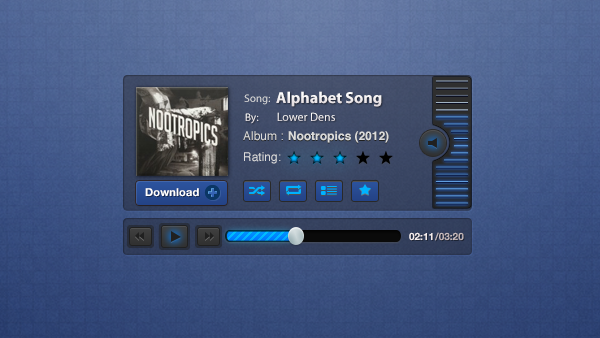
<style>
.page{position:relative;width:600px;height:338px}
.page>*{position:absolute;margin:0}
.t1{font:11px "MyriadPro-Regular";color:#dbdbdb}
.t2{font:16px "MyriadPro-Bold";color:#ffffff}
.t3{font:12px "MyriadPro-Regular";color:#ffffff}
.t4{font:11px "MyriadPro-Regular";color:#ccc0c2}
.t5{font:12px "Helvetica-Bold";color:#dbdbdb}
.t6{font:12px "Helvetica";color:#dbdbdb}
.t7{font:11px "Helvetica75-Bold";letter-spacing:0.015em;color:#ffffff}
.t8{font:10px "Helvetica75-Bold";color:#f1e8e9}
.t9{font:10px "Helvetica75-Bold";color:#b3a4a6}
</style>
<div class="page">
<p class="t1" style="left:244px;top:94px;width:26px;height:11px">Song:</p>
<p class="t2" style="left:276px;top:91px;width:106px;height:16px">Alphabet Song</p>
<p class="t3" style="left:245px;top:112px;width:90px;height:12px"><span class="t4">By:       </span>Lower Dens</p>
<p class="t5" style="left:243px;top:131px;width:146px;height:12px"><span class="t6">Album : </span>Nootropics (2012)</p>
<p class="t6" style="left:244px;top:152px;width:37px;height:12px">Rating:</p>
<p class="t7" style="left:145px;top:188px;width:54px;height:9px">Download</p>
<p class="t8" style="left:409px;top:232px;width:24px;height:9px">02:11</p>
<p class="t9" style="left:435px;top:232px;width:29px;height:9px">/03:20</p>
</div>
